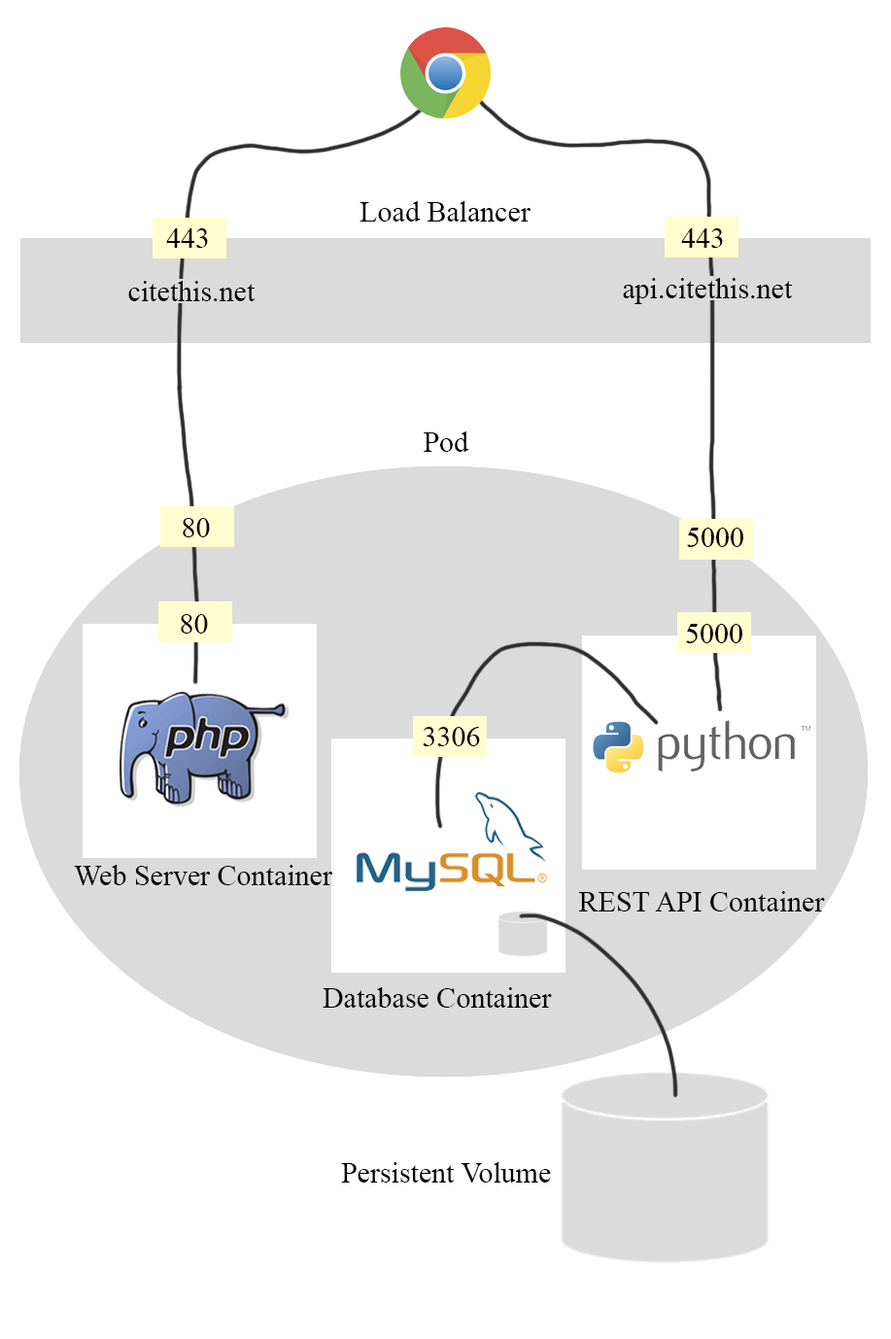
<style>
.page{position:relative;width:891px;height:1339px;background:#ffffff}
.page>*{position:absolute;margin:0}
.t1{font:29.1px "TimesNewRomanPSMT";color:#000000}
</style>
<div class="page">
<p class="t1" style="left:359px;top:201px;width:171px;height:20px">Load Balancer</p>
<p class="t1" style="left:166px;top:228px;width:42px;height:20px">443</p>
<p class="t1" style="left:681px;top:228px;width:42px;height:20px">443</p>
<p class="t1" style="left:128px;top:281px;width:127px;height:20px">citethis.net</p>
<p class="t1" style="left:623px;top:278px;width:170px;height:26px">api.citethis.net</p>
<p class="t1" style="left:424px;top:431px;width:45px;height:21px">Pod</p>
<p class="t1" style="left:183px;top:518px;width:27px;height:19px">80</p>
<p class="t1" style="left:687px;top:527px;width:56px;height:20px">5000</p>
<p class="t1" style="left:181px;top:614px;width:27px;height:19px">80</p>
<p class="t1" style="left:686px;top:624px;width:56px;height:19px">5000</p>
<p class="t1" style="left:423px;top:727px;width:57px;height:19px">3306</p>
<p class="t1" style="left:74px;top:865px;width:258px;height:20px">Web Server Container</p>
<p class="t1" style="left:579px;top:891px;width:246px;height:20px">REST API Container</p>
<p class="t1" style="left:323px;top:987px;width:229px;height:20px">Database Container</p>
<p class="t1" style="left:341px;top:1162px;width:210px;height:20px">Persistent Volume</p>
</div>
